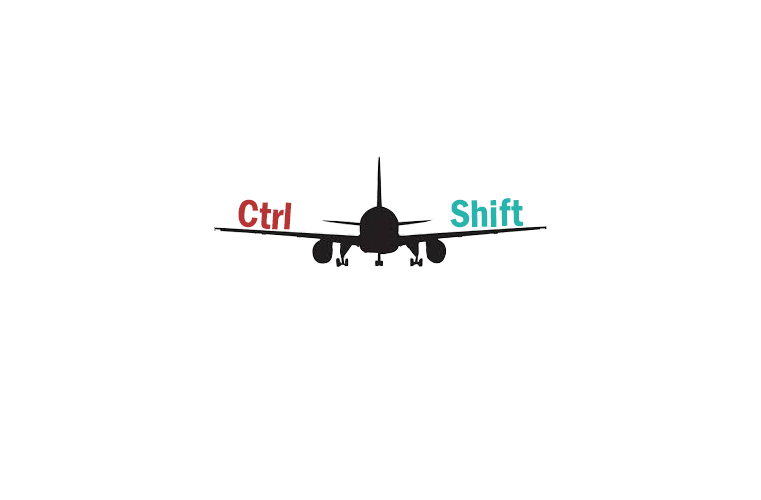
<style>
.page{position:relative;width:761px;height:500px;background:#ffffff}
.page>*{position:absolute;margin:0}
.t1{font:40px "FranklinGothic-DemiCond";color:#26b4ad}
.t2{font:40px "FranklinGothic-DemiCond";color:#b73434}
</style>
<div class="page">
<p class="t1" style="left:450px;top:198px;width:73px;height:30px;rotate:-1deg">Shift</p>
<p class="t2" style="left:238px;top:199px;width:54px;height:31px;rotate:4deg">Ctrl</p>
</div>
